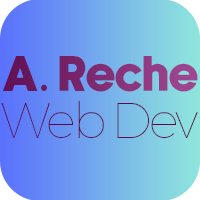
<style>
.page{position:relative;width:200px;height:200px}
.page>*{position:absolute;margin:0}
.t1{font:50px "NewakeDemo"}
.t2{font:50px "MyriadPro-Regular"}
.t3{font:50px "Alexandria-Thin";letter-spacing:-0.05em;color:#5a0b4d}
</style>
<div class="page">
<p class="t1" style="left:3px;top:56px;width:195px;height:36px">A<span class="t2">. </span>Reche</p>
<p class="t3" style="left:1px;top:101px;width:197px;height:37px">Web Dev</p>
</div>
